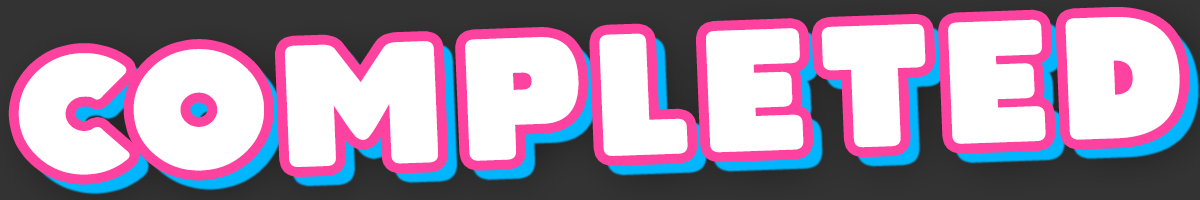
<style>
.page{position:relative;width:1200px;height:200px;background:#ffffff}
.page>*{position:absolute;margin:0}
.t1{font:177.2px "ToyBox";letter-spacing:0.08em;color:#ffffff;text-transform:uppercase;scale:1.08 1}
</style>
<div class="page">
<p class="t1" style="left:18px;top:17px;width:1162px;height:158px;rotate:-2deg">COMPLETED</p>
</div>
